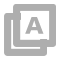
<style>
.page{position:relative;width:60px;height:60px;background:#ffffff}
.page>*{position:absolute;margin:0}
.t1{font:24px "ArticulateExtrabold";color:#aeaeae}
</style>
<div class="page">
<p class="t1" style="left:25px;top:17px;width:19px;height:17px">A</p>
</div>
